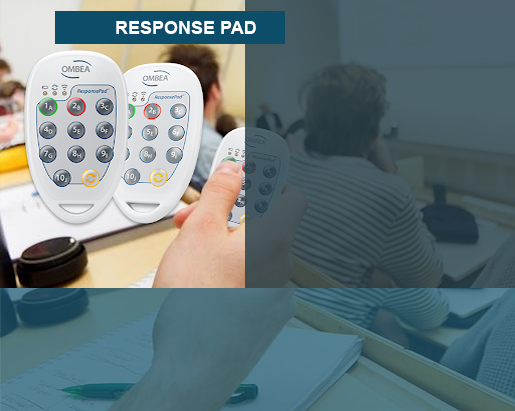
<style>
.page{position:relative;width:515px;height:411px}
.page>*{position:absolute;margin:0}
.t1{font:18px "Arial-BoldMT";color:#ffffff;text-transform:uppercase}
</style>
<div class="page">
<p class="t1" style="left:116px;top:21px;width:140px;height:13px">REsPONSE PAD</p>
</div>
